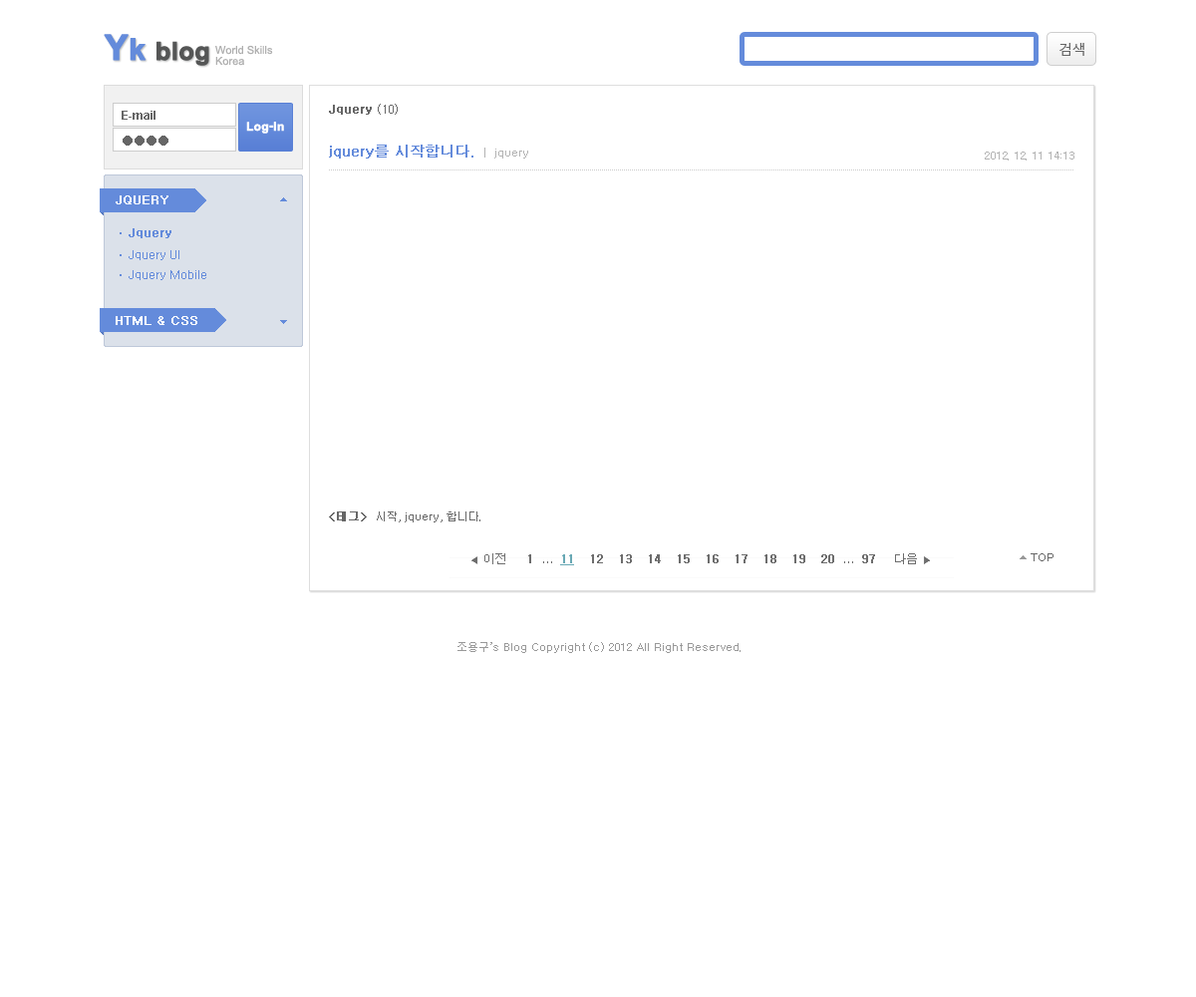
<style>
.page{position:relative;width:1196px;height:997px;background:#ffffff}
.page>*{position:absolute;margin:0}
.t1{font:24.9px "Arial-BoldMT";color:#555656;font-weight:bold}
.t2{font:34.9px "Arial-BoldMT";color:#648bdb;font-weight:bold}
.t3{font:29.9px "Arial-BoldMT";color:#648bdb;font-weight:bold}
.t4{font:11px/11px "ArialMT";color:#afafaf}
.t5{font:14.2px "MalgunGothicRegular";letter-spacing:-0.05em;color:#666666}
.t6{font:12px "Arial-BoldMT";color:#666666}
.t7{font:12px "Dotum";color:#666666;font-weight:bold}
.t8{font:12px "Dotum";color:#666666}
.t9{font:12px "Arial-BoldMT";color:#ffffff;font-weight:bold}
.t10{font:12px "Gulim";color:#666666}
.t11{font:14px "Dotum";color:#648bdb;font-weight:bold}
.t12{font:11px "Dotum";color:#b3b3b3}
.t13{font:12px "Dotum";color:#ffffff;text-transform:uppercase;font-weight:bold}
.t14{font:12px "Dotum";color:#648bdb;font-weight:bold}
.t15{font:12px "Dotum";color:#648bdb}
.t16{font:11px "Dotum";color:#676767}
.t17{font:11px "Dotum";color:#676767;font-weight:bold}
.t18{font:11px "Dotum";color:#676767;text-transform:uppercase}
.t19{font:11px "Dotum";color:#999999}
</style>
<div class="page">
<p class="t1" style="left:104px;top:34px;width:105px;height:32px"><span class="t2">Y</span><span class="t3">k </span>blog</p>
<p class="t4" style="left:215px;top:45px;width:58px;height:21px">World Skills<br>Korea</p>
<p class="t5" style="left:1060px;top:43px;width:25px;height:13px">검색</p>
<p class="t6" style="left:122px;top:111px;width:34px;height:9px">E-mail</p>
<p class="t7" style="left:329px;top:104px;width:69px;height:11px">Jquery <span class="t8">(10)</span></p>
<p class="t9" style="left:246px;top:122px;width:38px;height:12px">Log-In</p>
<p class="t10" style="left:123px;top:136px;width:45px;height:10px">●●●●</p>
<p class="t11" style="left:329px;top:145px;width:199px;height:13px">jquery를 시작합니다.<span class="t12">  |  jquery</span></p>
<p class="t12" style="left:985px;top:152px;width:90px;height:8px">2012. 12. 11 14:13</p>
<p class="t13" style="left:116px;top:195px;width:52px;height:9px">jquery</p>
<p class="t14" style="left:129px;top:228px;width:42px;height:10px">Jquery</p>
<p class="t15" style="left:129px;top:250px;width:50px;height:10px">Jquery UI</p>
<p class="t15" style="left:129px;top:270px;width:77px;height:10px">Jquery Mobile</p>
<p class="t13" style="left:116px;top:316px;width:81px;height:9px">HTML &amp; CSS</p>
<p class="t16" style="left:329px;top:511px;width:151px;height:11px"><span class="t17">&lt;태그&gt;</span>  시작, jquery, 합니다.</p>
<p class="t18" style="left:1031px;top:553px;width:23px;height:8px">Top</p>
<p class="t19" style="left:458px;top:642px;width:283px;height:11px">조용구’s Blog Copyright (c) 2012 All Right Reserved.</p>
</div>
